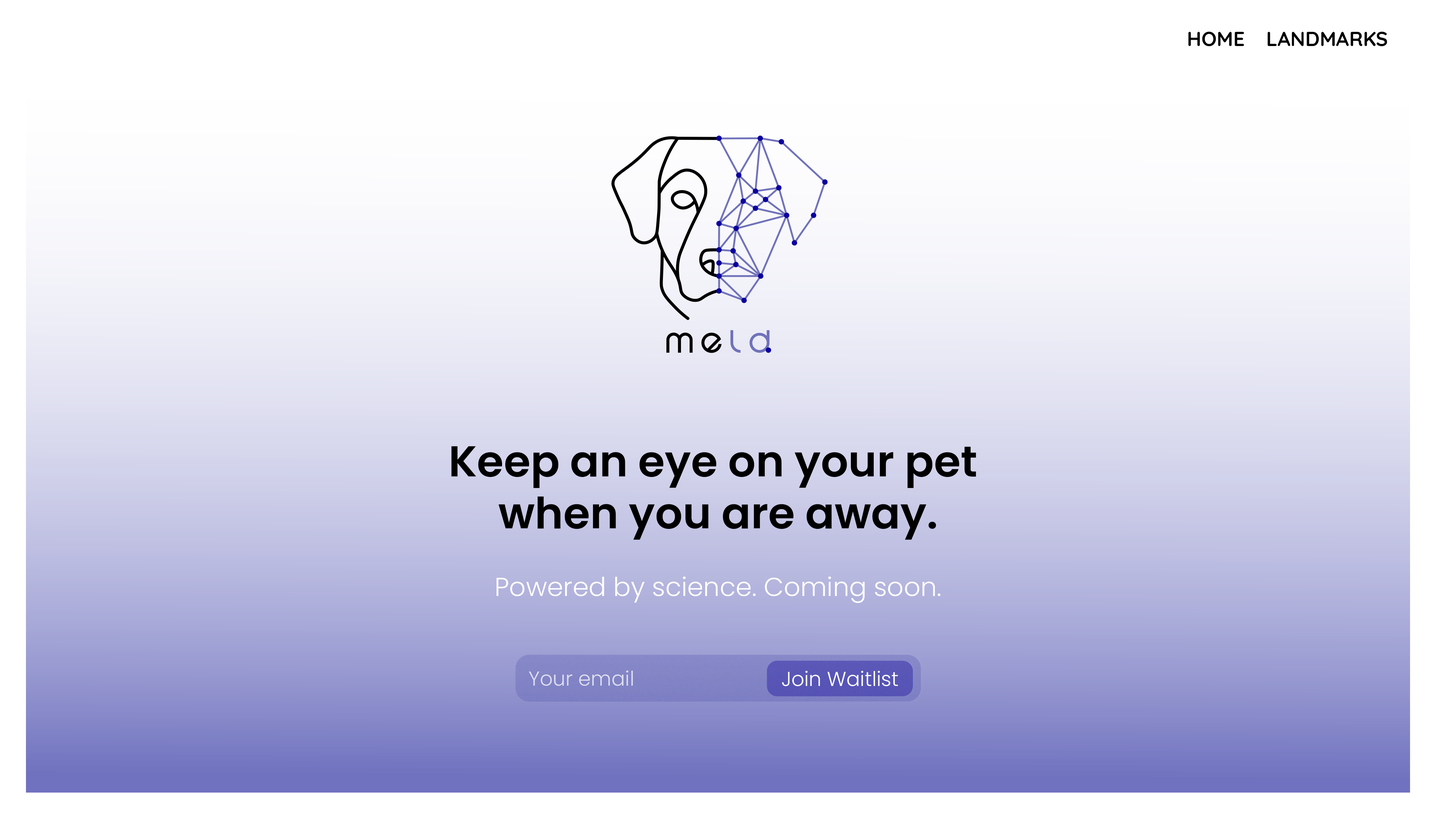
<style>
.page{position:relative;width:1436px;height:831px}
.page>*{position:absolute;margin:0}
.t1{font:20.2px "Quicksand-Bold";color:#000000}
.t2{font:43.2px "Poppins-SemiBold";color:#000000}
.t3{font:25.9px "Poppins-Light";color:#ffffff}
.t4{font:20.2px "Poppins-Light";color:#dedfef}
.t5{font:20.2px "Poppins-Light";color:#ffffff}
</style>
<div class="page">
<p class="t1" style="left:1188px;top:31px;width:56px;height:15px">HOME</p>
<p class="t1" style="left:1267px;top:31px;width:120px;height:15px">LANDMARKS</p>
<p class="t2" style="left:451px;top:446px;width:525px;height:94px;text-align:center">Keep an eye on your pet <br>when you are away.</p>
<p class="t3" style="left:496px;top:576px;width:444px;height:27px">Powered by science. Coming soon.</p>
<p class="t4" style="left:529px;top:670px;width:104px;height:16px">Your email</p>
<p class="t5" style="left:782px;top:670px;width:116px;height:16px">Join Waitlist</p>
</div>
